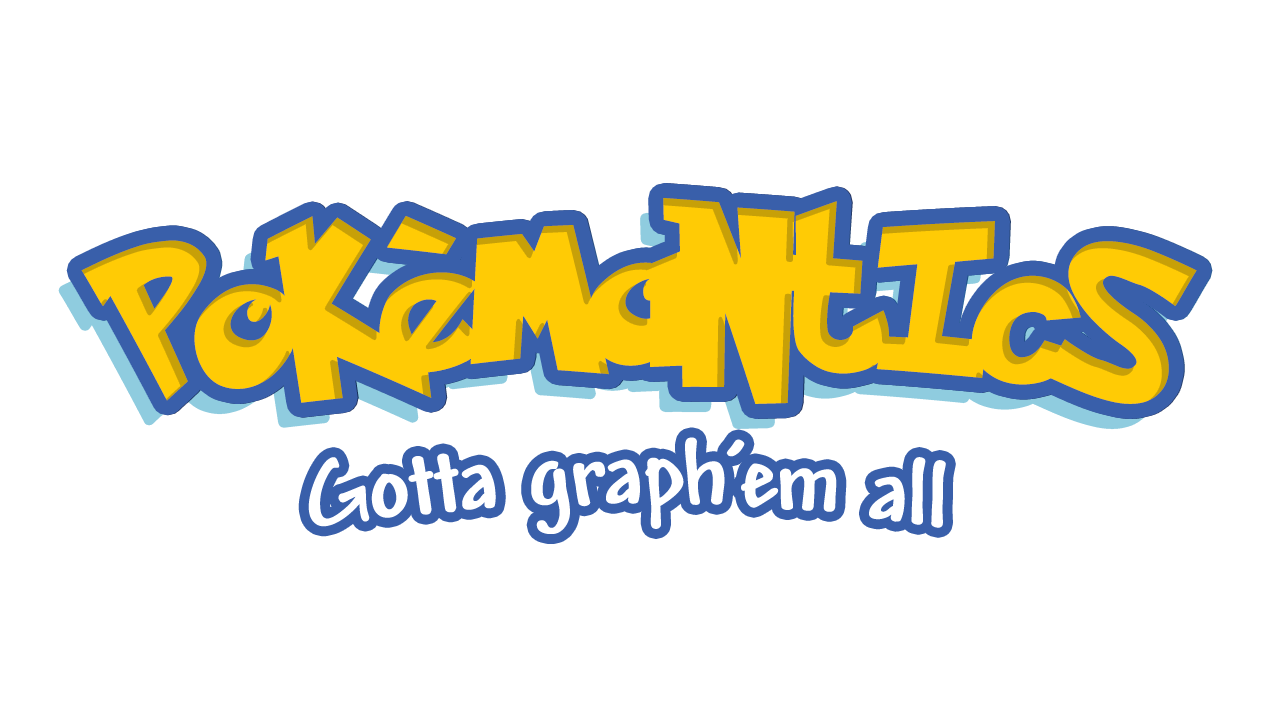
<style>
.page{position:relative;width:1280px;height:720px;background:#ffffff}
.page>*{position:absolute;margin:0}
.t1{font:174.3px "PokemonSolidNormal";letter-spacing:-0.02em;color:#ffcb05}
.t2{font:95.8px "Andy-Bold";letter-spacing:-0.02em;color:#ffffff}
</style>
<div class="page">
<p class="t1" style="left:81px;top:198px;width:1116px;height:206px">PoKèMaNtIcS</p>
<p class="t1" style="left:82px;top:198px;width:1116px;height:206px">PoKèMaNtIcS</p>
<p class="t2" style="left:308px;top:437px;width:638px;height:97px">Gotta graph’em all</p>
</div>
